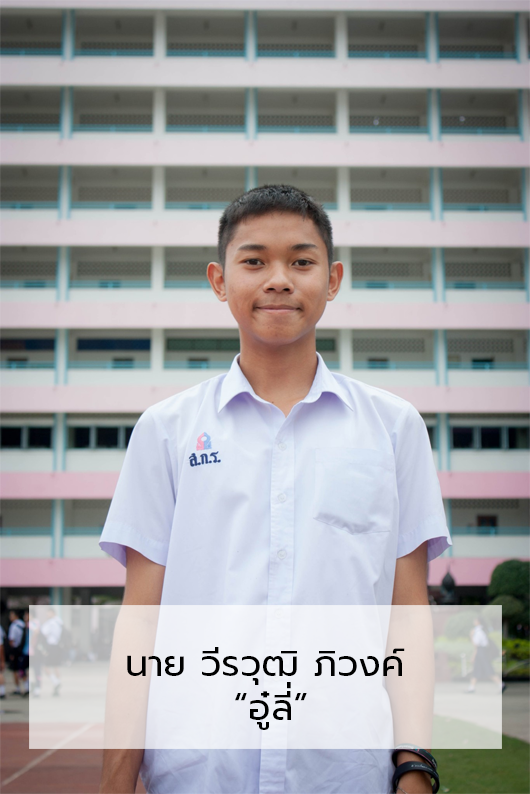
<style>
.page{position:relative;width:530px;height:794px}
.page>*{position:absolute;margin:0}
.t1{font:36.7px "Prompt-Regular";color:#000000}
</style>
<div class="page">
<p class="t1" style="left:127px;top:647px;width:278px;height:83px">นาย วีรวุฒิ ภิวงค์<br>        “อู๋ลี่”</p>
</div>
